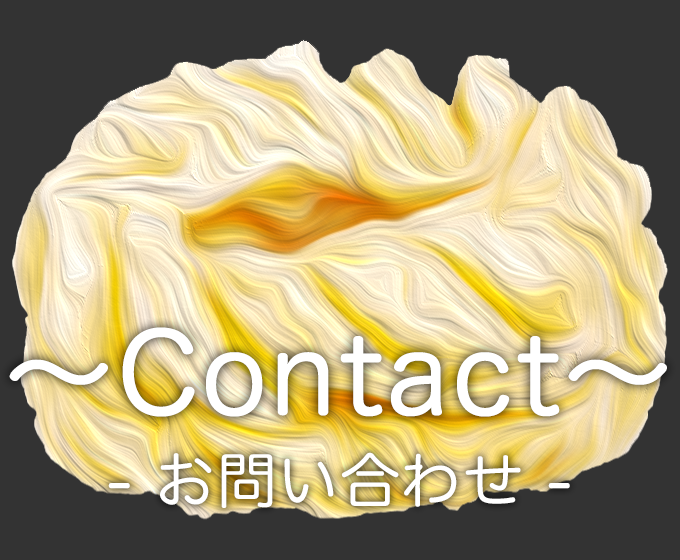
<style>
.page{position:relative;width:680px;height:560px;background:#333333}
.page>*{position:absolute;margin:0}
.t1{font:110px "HiraMaruProN-W4";letter-spacing:0.025em;color:#ffffff}
.t2{font:60px "HiraMaruProN-W4";letter-spacing:0.025em;color:#ffffff}
</style>
<div class="page">
<p class="t1" style="left:9px;top:327px;width:658px;height:90px">〜Contact〜</p>
<p class="t2" style="left:108px;top:452px;width:462px;height:56px">- お問い合わせ -</p>
</div>
